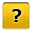
<style>
.page{position:relative;width:32px;height:32px;background:#ffffff}
.page>*{position:absolute;margin:0}
.t1{font:18px "Meiryo-Bold";color:#000000}
</style>
<div class="page">
<p class="t1" style="left:12px;top:9px;width:10px;height:13px">?</p>
</div>
